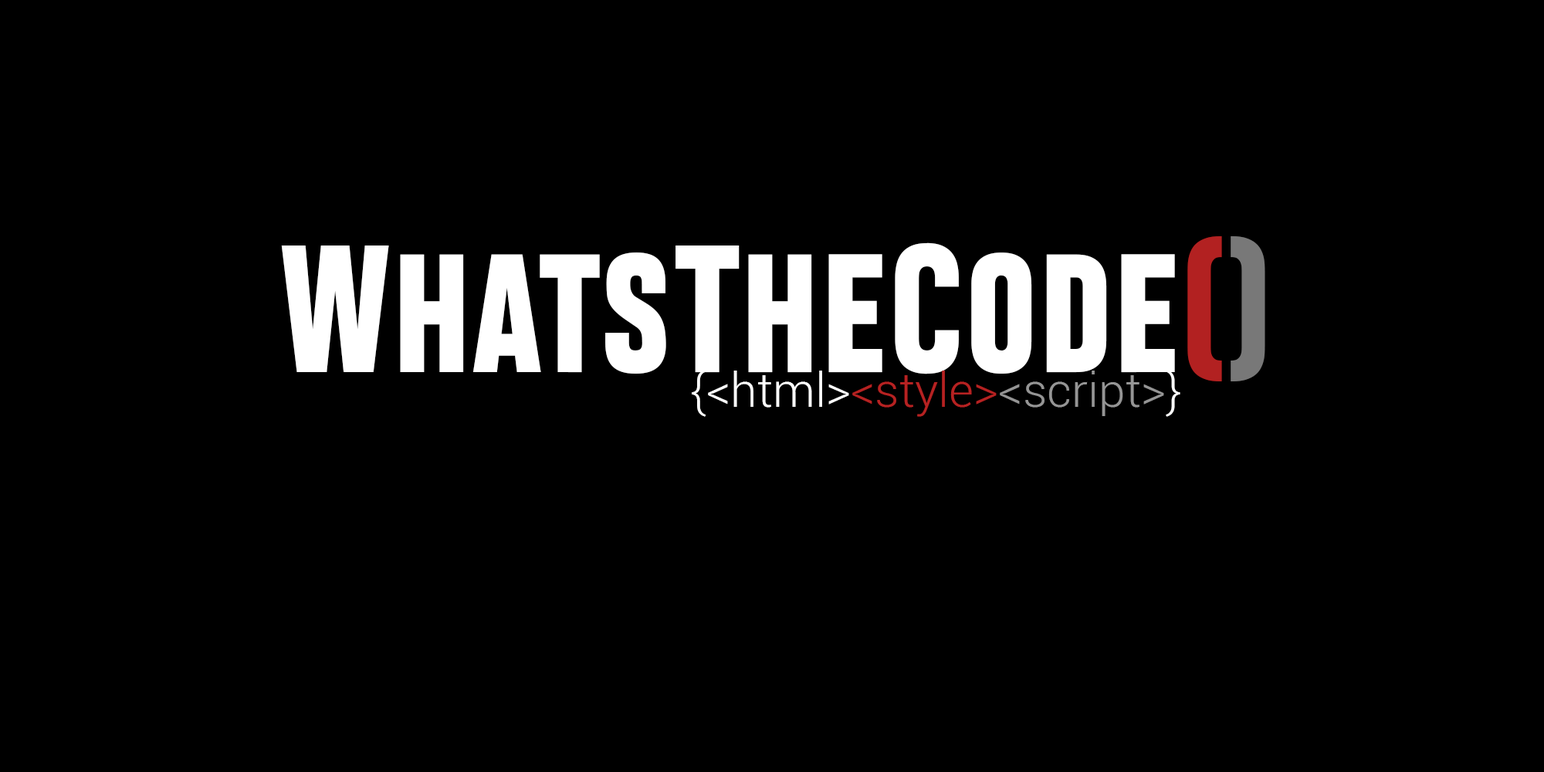
<style>
.page{position:relative;width:1544px;height:772px;background:#000000}
.page>*{position:absolute;margin:0}
.t1{font:170.5px "HeadingSmallcaseProTrial-ExtraB";color:#ffffff}
.t2{font:170.5px "HeadingSmallcaseProTrial-ExtraB";color:#b22121}
.t3{font:170.5px "HeadingSmallcaseProTrial-ExtraB";color:#787878}
.t4{font:47.8px "Roboto-Light";color:#959595}
.t5{font:47.8px "Roboto-Light";color:#ffffff}
.t6{font:47.8px "Roboto-Light";color:#b62222}
</style>
<div class="page">
<p class="t1" style="left:281px;top:236px;width:985px;height:145px">WhatsTheCode<span class="t2">(</span><span class="t3">)</span></p>
<p class="t4" style="left:692px;top:370px;width:489px;height:47px"><span class="t5">{&lt;html&gt;</span><span class="t6">&lt;style&gt;</span>&lt;script&gt;<span class="t5">}</span></p>
</div>
